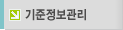
<style>
.page{position:relative;width:123px;height:30px;background:#dcdcdc}
.page>*{position:absolute;margin:0}
.t1{font:12.1px "H2gtrE";color:#4d4c4c;scale:0.85 1}
</style>
<div class="page">
<p class="t1" style="left:25px;top:9px;width:61px;height:12px">기준정보관리</p>
</div>
